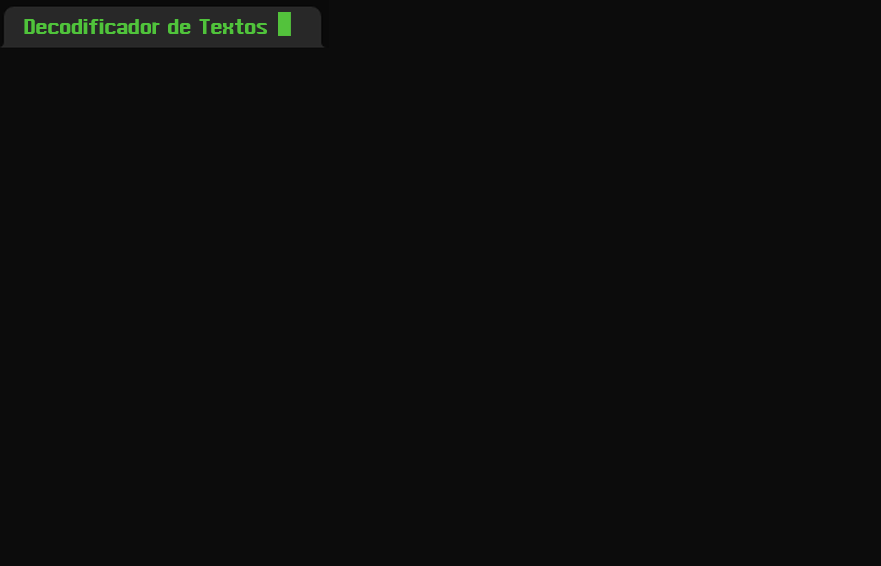
<style>
.page{position:relative;width:881px;height:566px;background:#0c0c0c}
.page>*{position:absolute;margin:0}
.t1{font:21.7px "MacType";color:#50c33b}
</style>
<div class="page">
<p class="t1" style="left:24px;top:19px;width:243px;height:15px">Decodificador de Textos</p>
</div>
